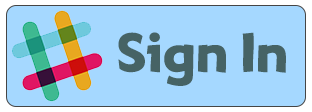
<style>
.page{position:relative;width:312px;height:112px;background:#a5d8ff}
.page>*{position:absolute;margin:0}
.t1{font:48px "Adventuring";letter-spacing:-0.02em;color:#466365}
</style>
<div class="page">
<p class="t1" style="left:118px;top:32px;width:168px;height:54px">Sign In</p>
</div>
